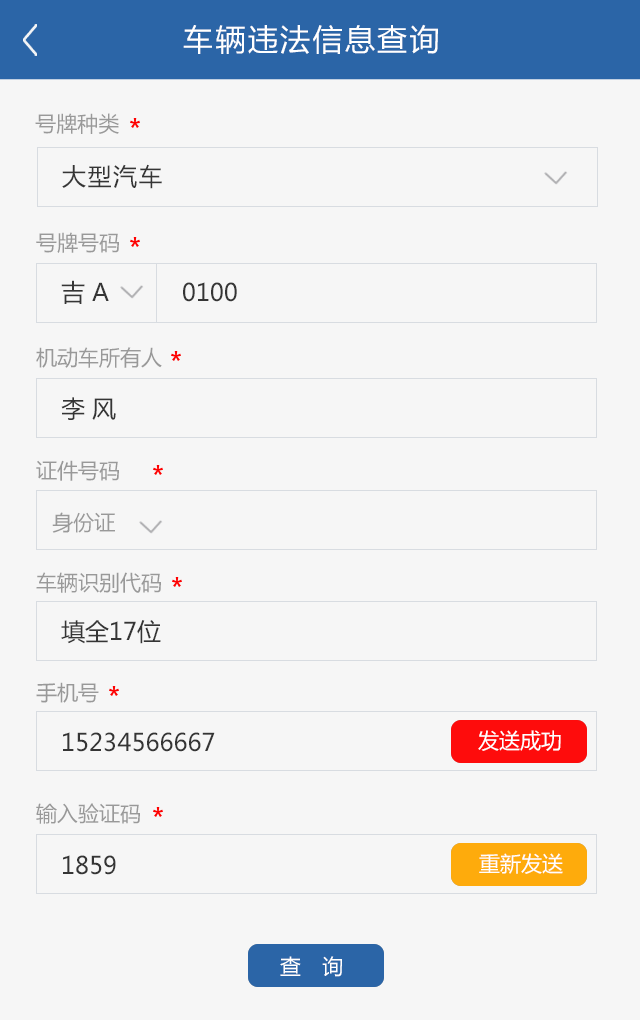
<style>
.page{position:relative;width:640px;height:1020px;background:#f6f6f6}
.page>*{position:absolute;margin:0}
.t1{font:30px "MicrosoftYaHei";letter-spacing:0.08em;color:#ffffff}
.t2{font:21px "MicrosoftYaHei";color:#999999}
.t3{font:24px "MicrosoftYaHei";letter-spacing:0.06em;color:#353535}
.t4{font:24px "MicrosoftYaHei";color:#353535}
.t5{font:21px "MicrosoftYaHei";color:#ffffff}
.t6{font:21px "MicrosoftYaHei";letter-spacing:0.14em;color:#ffffff}
</style>
<div class="page">
<p class="t1" style="left:183px;top:24px;width:255px;height:30px">车辆违法信息查询</p>
<p class="t2" style="left:35px;top:113px;width:84px;height:21px">号牌种类</p>
<p class="t3" style="left:62px;top:164px;width:100px;height:25px">大型汽车</p>
<p class="t2" style="left:36px;top:232px;width:83px;height:21px">号牌号码</p>
<p class="t4" style="left:61px;top:280px;width:48px;height:24px">吉 A</p>
<p class="t4" style="left:183px;top:282px;width:54px;height:20px">0100</p>
<p class="t2" style="left:36px;top:347px;width:126px;height:21px">机动车所有人</p>
<p class="t4" style="left:61px;top:397px;width:55px;height:23px">李 风</p>
<p class="t2" style="left:36px;top:460px;width:83px;height:21px">证件号码</p>
<p class="t2" style="left:52px;top:512px;width:63px;height:21px">身份证</p>
<p class="t2" style="left:36px;top:572px;width:125px;height:21px">车辆识别代码</p>
<p class="t4" style="left:61px;top:620px;width:100px;height:24px">填全17位</p>
<p class="t2" style="left:36px;top:682px;width:63px;height:21px">手机号</p>
<p class="t4" style="left:63px;top:732px;width:152px;height:20px">15234566667</p>
<p class="t5" style="left:478px;top:730px;width:83px;height:21px">发送成功</p>
<p class="t2" style="left:36px;top:803px;width:104px;height:21px">输入验证码</p>
<p class="t4" style="left:63px;top:855px;width:53px;height:20px">1859</p>
<p class="t5" style="left:479px;top:853px;width:84px;height:21px">重新发送</p>
<p class="t6" style="left:280px;top:956px;width:62px;height:21px">查  询</p>
</div>
